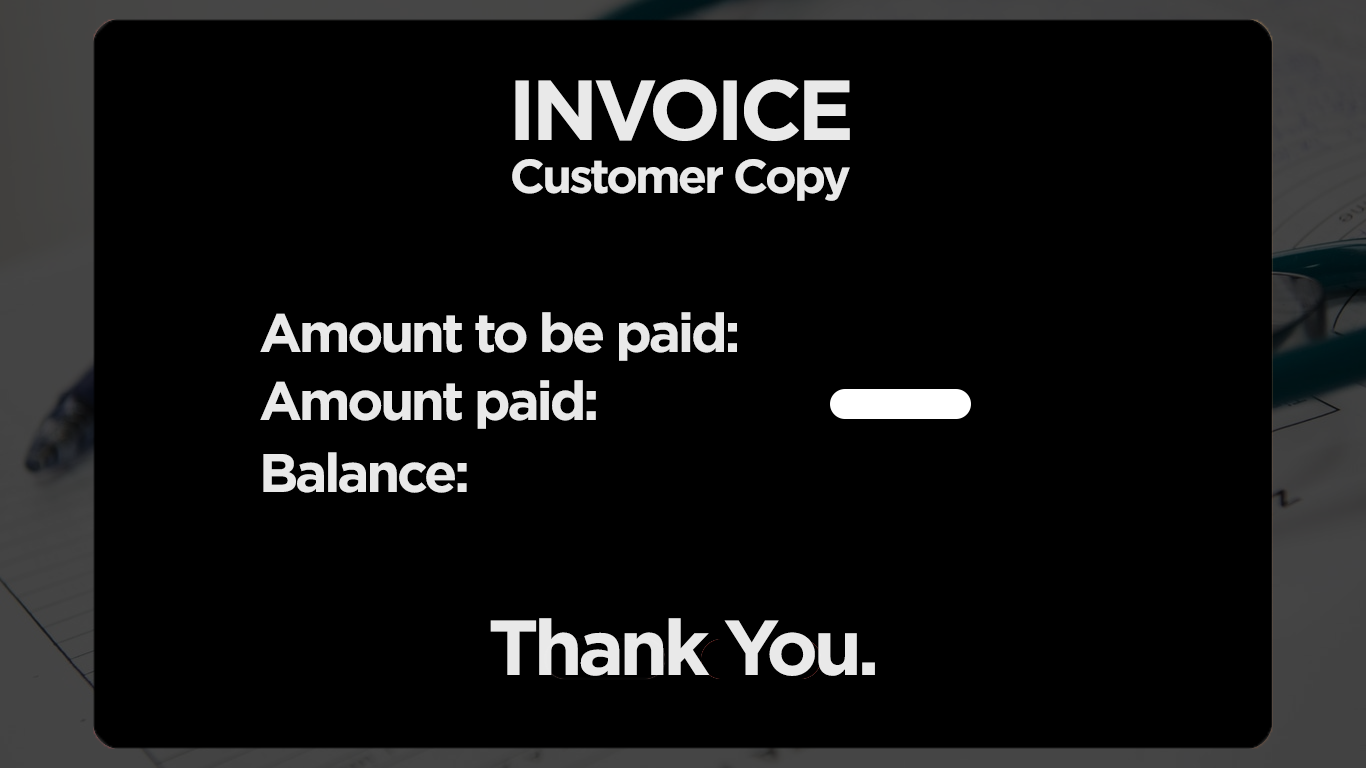
<style>
.page{position:relative;width:1366px;height:768px;background:#000000}
.page>*{position:absolute;margin:0}
.t1{font:84.9px "Gotham-Bold";letter-spacing:-0.06em;color:#ffffff}
.t2{font:47.8px "Gotham-Bold";letter-spacing:-0.06em;color:#ffffff}
.t3{font:54.3px "Gotham-Bold";letter-spacing:-0.06em;color:#ffffff}
.t4{font:77.8px "Gotham-Bold";letter-spacing:-0.06em;color:#ffffff}
</style>
<div class="page">
<p class="t1" style="left:515px;top:79px;width:335px;height:62px;opacity:0.87">INVOICE</p>
<p class="t2" style="left:512px;top:159px;width:338px;height:42px;opacity:0.87">Customer Copy</p>
<p class="t3" style="left:260px;top:312px;width:477px;height:49px;opacity:0.87">Amount to be paid:</p>
<p class="t3" style="left:260px;top:380px;width:336px;height:49px;opacity:0.87">Amount paid:</p>
<p class="t3" style="left:263px;top:452px;width:204px;height:41px;opacity:0.87">Balance:</p>
<p class="t4" style="left:490px;top:618px;width:385px;height:58px;opacity:0.87">Thank You.</p>
</div>
